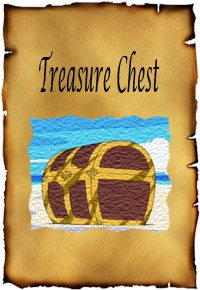
<style>
.page{position:relative;width:200px;height:290px}
.page>*{position:absolute;margin:0}
.t1{font:48px "LucidaCalligraphy-Italic";color:#000000;scale:0.32 1}
</style>
<div class="page">
<p class="t1" style="left:38px;top:51px;width:122px;height:42px">Treasure Chest</p>
</div>
